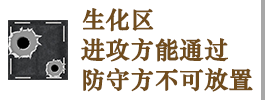
<style>
.page{position:relative;width:265px;height:100px;background:#ffffff}
.page>*{position:absolute;margin:0}
.t1{font:24px/30px "STZhongsong";color:#704c1d;font-weight:bold}
</style>
<div class="page">
<p class="t1" style="left:81px;top:8px;width:172px;height:84px">生化区<br>进攻方能通过<br>防守方不可放置</p>
</div>
